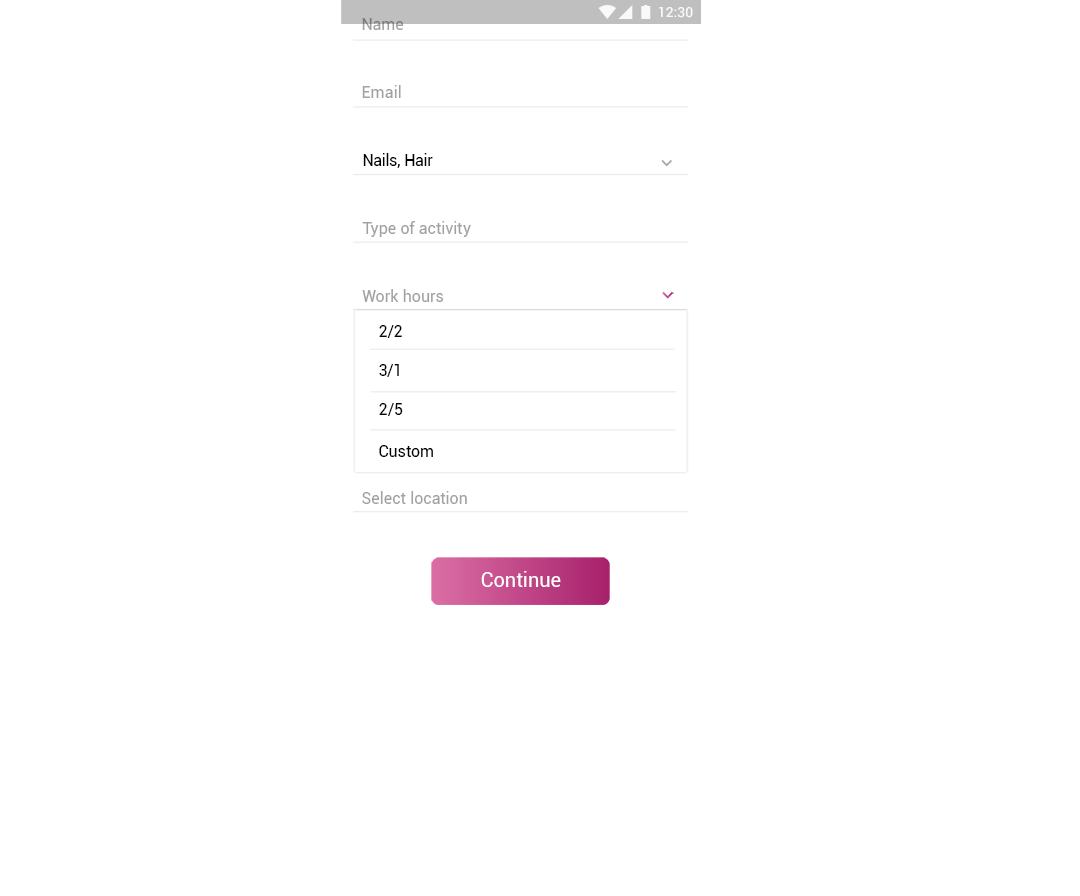
<style>
.page{position:relative;width:1080px;height:896px;background:#ffffff}
.page>*{position:absolute;margin:0}
.t1{font:14px "Roboto-Medium";color:#ffffff}
.t2{font:16px "Roboto-Regular";letter-spacing:0.01em}
.t3{font:16px "Roboto-Regular";letter-spacing:0.01em;color:#a1a1a1}
.t4{font:16px "Roboto-Regular";letter-spacing:-0.005em;color:#000000}
.t5{font:16px "Roboto-Regular";letter-spacing:0.01em;color:#000000}
.t6{font:20px "Roboto-Regular";color:#ffffff}
</style>
<div class="page">
<p class="t1" style="left:659px;top:7px;width:34px;height:11px">12:30</p>
<p class="t2" style="left:362px;top:18px;width:42px;height:12px">Name</p>
<p class="t3" style="left:362px;top:85px;width:39px;height:13px">Email</p>
<p class="t4" style="left:363px;top:153px;width:70px;height:15px">Nails, Hair</p>
<p class="t3" style="left:362px;top:221px;width:109px;height:16px">Type of activity</p>
<p class="t3" style="left:362px;top:289px;width:82px;height:13px">Work hours</p>
<p class="t4" style="left:379px;top:325px;width:23px;height:13px">2/2</p>
<p class="t4" style="left:379px;top:364px;width:20px;height:13px">3/1</p>
<p class="t5" style="left:379px;top:403px;width:24px;height:13px">2/5</p>
<p class="t5" style="left:379px;top:445px;width:54px;height:12px">Сustom</p>
<p class="t3" style="left:362px;top:491px;width:105px;height:13px">Select location</p>
<p class="t6" style="left:481px;top:571px;width:80px;height:16px">Continue</p>
</div>
